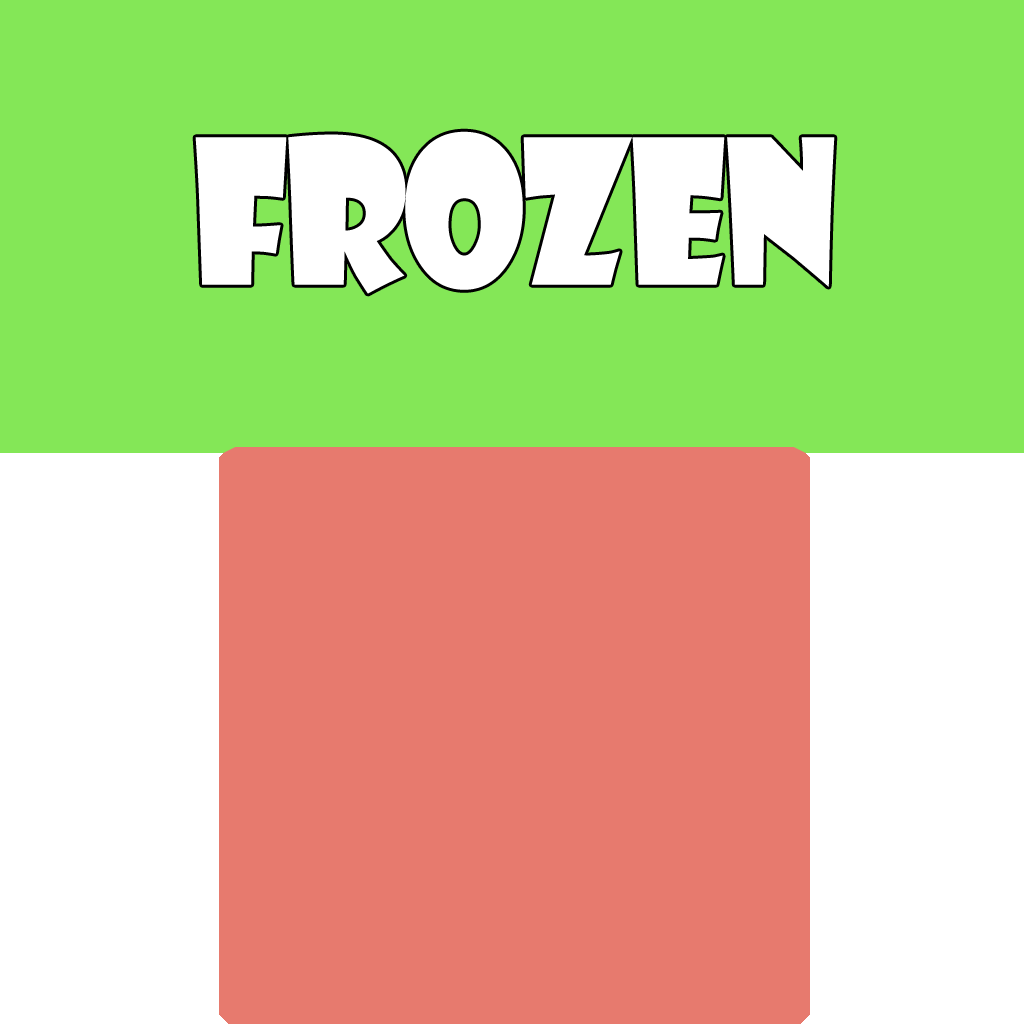
<style>
.page{position:relative;width:1024px;height:1024px;background:#84e757}
.page>*{position:absolute;margin:0}
.t1{font:196.1px "ShowcardGothic-Reg";letter-spacing:-0.025em;color:#ffffff;scale:0.91 1}
</style>
<div class="page">
<p class="t1" style="left:195px;top:131px;width:640px;height:163px">Frozen</p>
</div>
